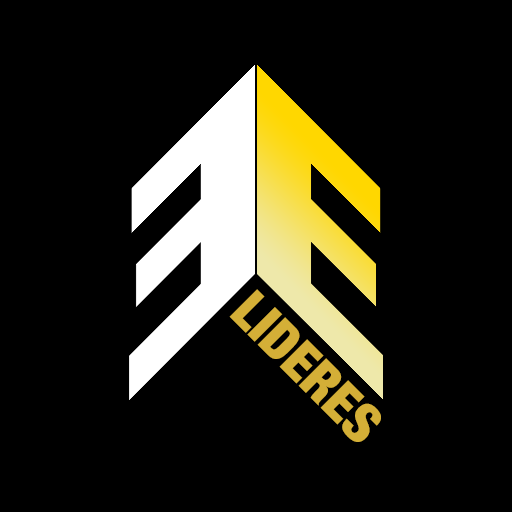
<style>
.page{position:relative;width:512px;height:512px;background:#000000}
.page>*{position:absolute;margin:0}
.t1{font:54.5px "HelveticaNeue-CondensedBlack";color:#d4af37}
</style>
<div class="page">
<p class="t1" style="left:229px;top:289px;width:152px;height:153px;rotate:45deg">LIDERES</p>
</div>
